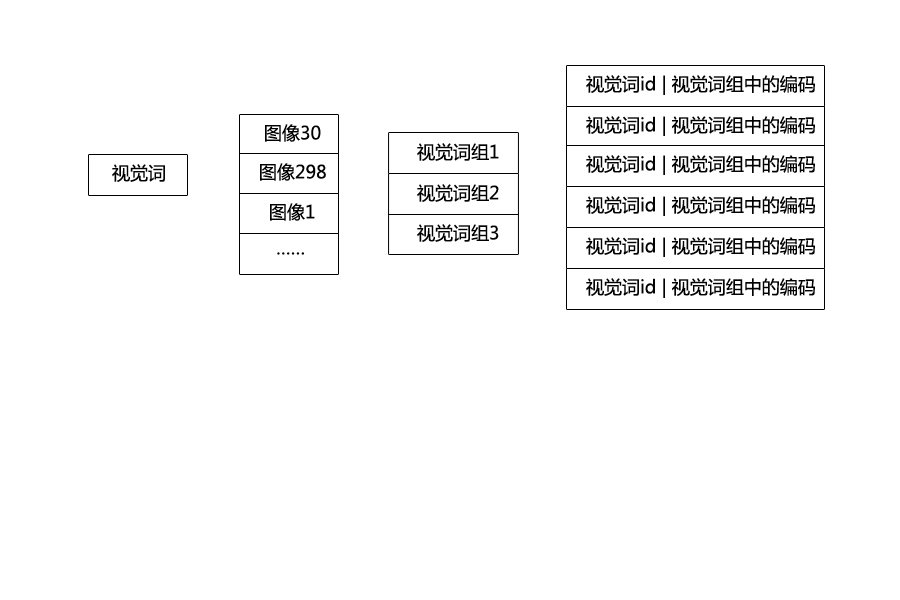
<style>
.page{position:relative;width:900px;height:600px;background:#ffffff}
.page>*{position:absolute;margin:0}
.t1{font:18px "MicrosoftYaHei";color:#000000}
</style>
<div class="page">
<p class="t1" style="left:586px;top:75px;width:229px;height:20px">视觉词id | 视觉词组中的编码</p>
<p class="t1" style="left:265px;top:124px;width:56px;height:18px">图像30</p>
<p class="t1" style="left:586px;top:116px;width:229px;height:20px">视觉词id | 视觉词组中的编码</p>
<p class="t1" style="left:417px;top:143px;width:82px;height:18px">视觉词组1</p>
<p class="t1" style="left:586px;top:155px;width:229px;height:20px">视觉词id | 视觉词组中的编码</p>
<p class="t1" style="left:112px;top:164px;width:53px;height:18px">视觉词</p>
<p class="t1" style="left:260px;top:163px;width:66px;height:18px">图像298</p>
<p class="t1" style="left:417px;top:184px;width:82px;height:18px">视觉词组2</p>
<p class="t1" style="left:586px;top:196px;width:229px;height:20px">视觉词id | 视觉词组中的编码</p>
<p class="t1" style="left:270px;top:203px;width:45px;height:18px">图像1</p>
<p class="t1" style="left:417px;top:224px;width:82px;height:18px">视觉词组3</p>
<p class="t1" style="left:586px;top:237px;width:229px;height:20px">视觉词id | 视觉词组中的编码</p>
<p class="t1" style="left:277px;top:252px;width:27px;height:3px">……</p>
<p class="t1" style="left:586px;top:278px;width:229px;height:20px">视觉词id | 视觉词组中的编码</p>
</div>
